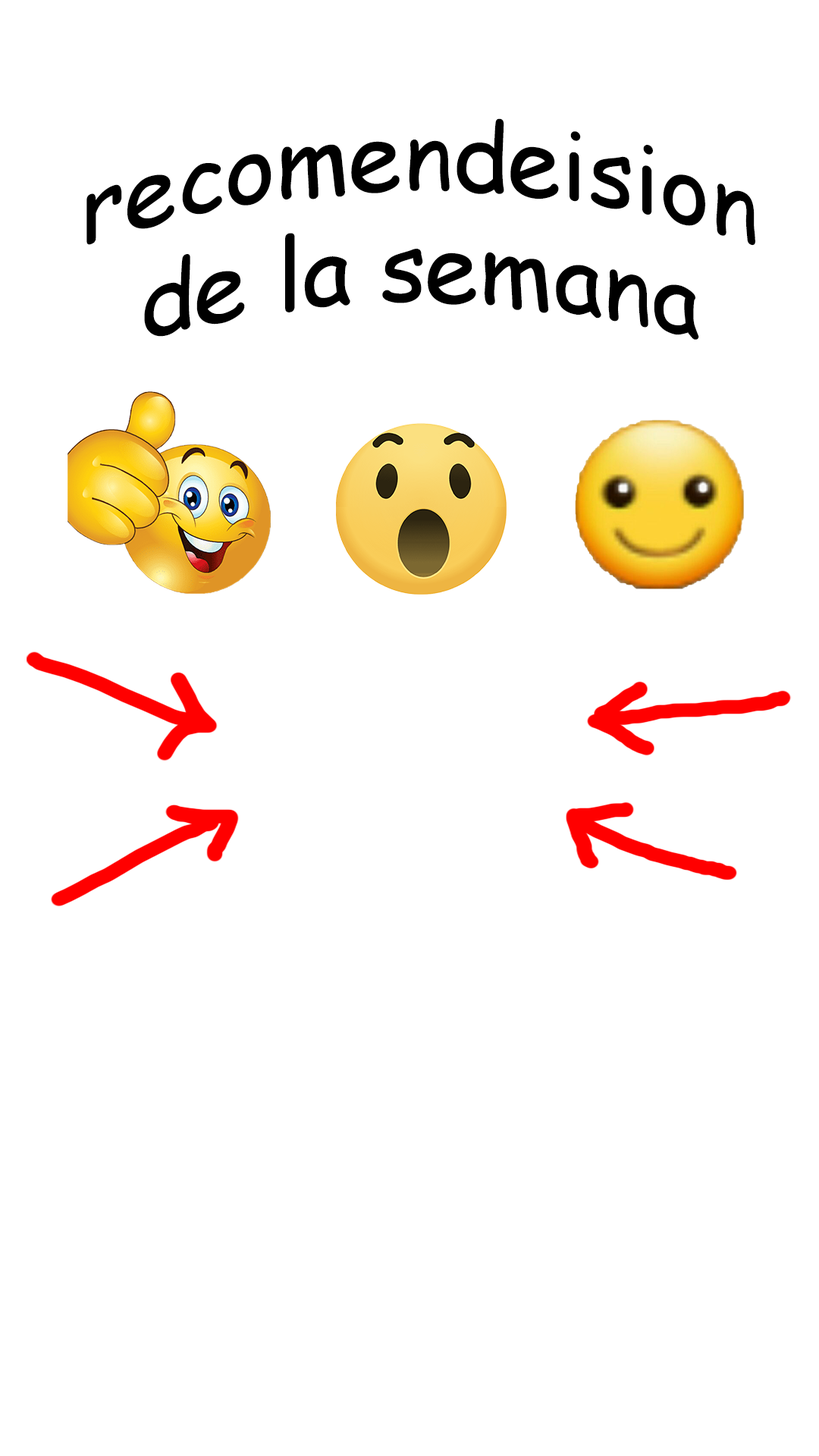
<style>
.page{position:relative;width:819px;height:1456px;background:#ffffff}
.page>*{position:absolute;margin:0}
.t1{font:94.7px "ComicSansMS";color:#000000}
</style>
<div class="page">
<p class="t1" style="left:86px;top:118px;width:669px;height:222px;text-align:center">recomendeision<br>de la semana</p>
</div>
